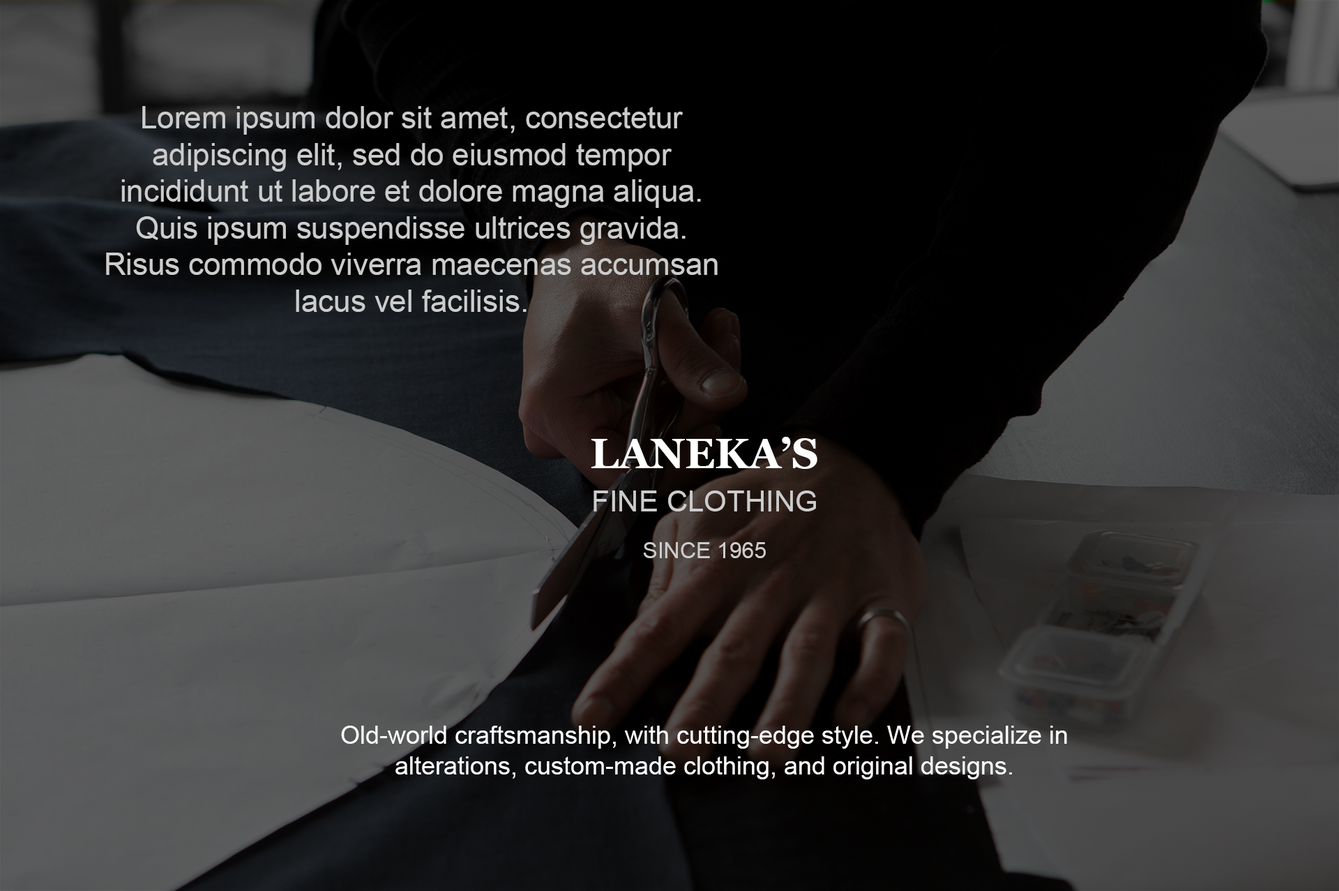
<style>
.page{position:relative;width:1339px;height:891px}
.page>*{position:absolute;margin:0}
.t1{font:30.5px "ArialMT";color:#cccccc}
.t2{font:41.8px "Georgia-Bold";color:#ffffff}
.t3{font:29.3px "ArialMT";color:#cccccc}
.t4{font:22.3px "ArialMT";color:#cccccc}
.t5{font:25.1px "ArialMT";color:#ffffff}
</style>
<div class="page">
<p class="t1" style="left:106px;top:106px;width:612px;height:206px;text-align:center">Lorem ipsum dolor sit amet, consectetur adipiscing elit, sed do eiusmod tempor incididunt ut labore et dolore magna aliqua. Quis ipsum suspendisse ultrices gravida. Risus commodo viverra maecenas accumsan lacus vel facilisis.</p>
<p class="t2" style="left:591px;top:437px;width:226px;height:32px">LANEKA’S</p>
<p class="t3" style="left:593px;top:490px;width:223px;height:68px;text-align:center">FINE CLOTHING<br><br><span class="t4">SINCE 1965</span></p>
<p class="t5" style="left:341px;top:725px;width:726px;height:54px;text-align:center">Old-world craftsmanship, with cutting-edge style. We specialize in alterations, custom-made clothing, and original designs.</p>
</div>
